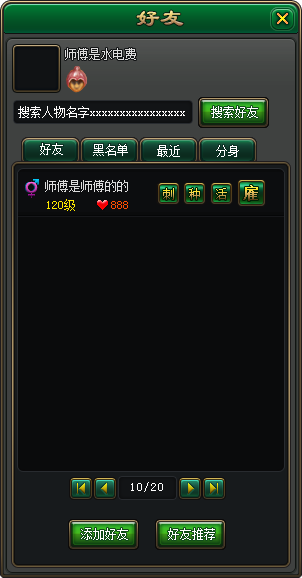
<style>
.page{position:relative;width:302px;height:578px;background:#0a0b0c}
.page>*{position:absolute;margin:0}
.t1{font:12px "SimSun";color:#dcdcdc}
.t2{font:12px "SimSun";color:#fefcfc}
.t3{font:12px "SimSun";color:#fffffe}
.t4{font:12px "SimSun";color:#ffffff}
.t5{font:12px "SimSun";color:#ffea00}
.t6{font:12px "SimSun";color:#ff4e00}
.t7{font:12px "SimSun";letter-spacing:0.08em;color:#ffffff}
</style>
<div class="page">
<p class="t1" style="left:65px;top:48px;width:71px;height:12px">师傅是水电费</p>
<p class="t2" style="left:18px;top:106px;width:167px;height:12px">搜索人物名字xxxxxxxxxxxxxxxx</p>
<p class="t3" style="left:211px;top:106px;width:47px;height:12px">搜索好友</p>
<p class="t4" style="left:40px;top:143px;width:23px;height:12px">好友</p>
<p class="t4" style="left:40px;top:143px;width:23px;height:12px">好友</p>
<p class="t4" style="left:40px;top:143px;width:23px;height:12px">好友</p>
<p class="t4" style="left:93px;top:144px;width:35px;height:12px">黑名单</p>
<p class="t4" style="left:93px;top:144px;width:35px;height:12px">黑名单</p>
<p class="t4" style="left:157px;top:145px;width:23px;height:12px">最近</p>
<p class="t4" style="left:216px;top:145px;width:23px;height:12px">分身</p>
<p class="t1" style="left:45px;top:180px;width:83px;height:12px">师傅是师傅的的</p>
<p class="t5" style="left:47px;top:199px;width:28px;height:12px">120级</p>
<p class="t6" style="left:111px;top:201px;width:17px;height:8px">888</p>
<p class="t7" style="left:131px;top:482px;width:32px;height:10px">10/20</p>
<p class="t3" style="left:81px;top:528px;width:47px;height:12px">添加好友</p>
<p class="t3" style="left:168px;top:528px;width:47px;height:12px">好友推荐</p>
</div>
